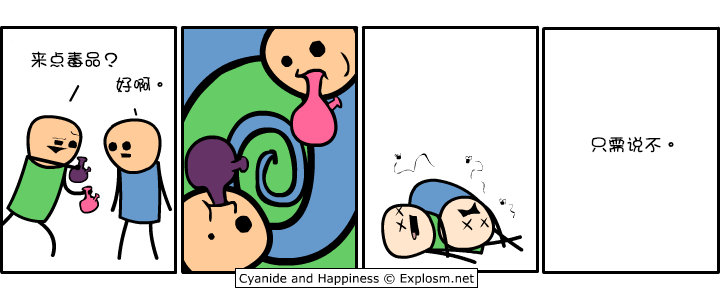
<style>
.page{position:relative;width:721px;height:289px;background:#ffffff}
.page>*{position:absolute;margin:0}
.t1{font:18px "DFGirl";color:#000000}
</style>
<div class="page">
<p class="t1" style="left:31px;top:51px;width:87px;height:17px">来点毒品？</p>
<p class="t1" style="left:116px;top:77px;width:47px;height:16px">好啊。</p>
<p class="t1" style="left:591px;top:136px;width:83px;height:17px">只需说不。</p>
</div>
